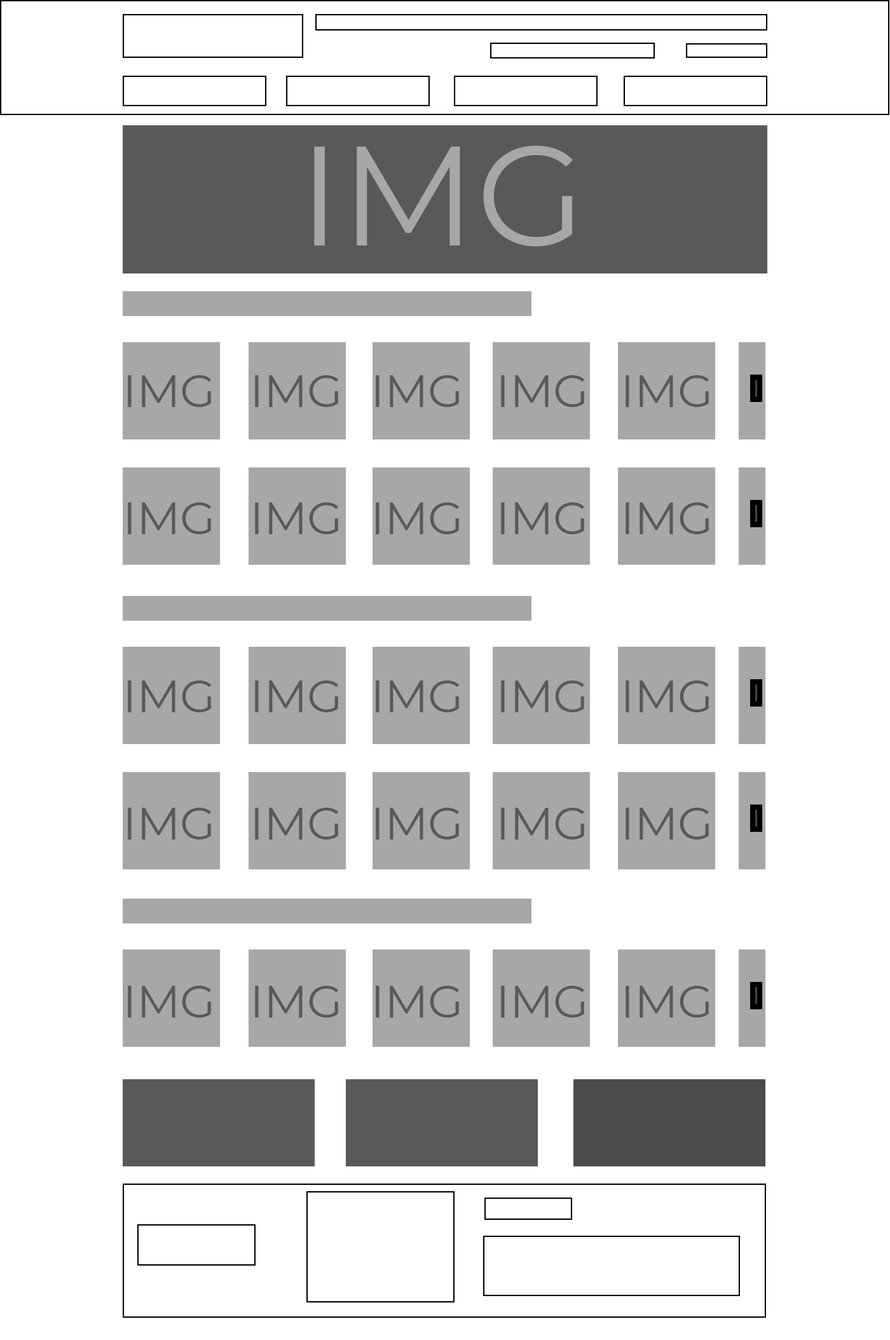
<style>
.page{position:relative;width:890px;height:1340px;background:#ffffff}
.page>*{position:absolute;margin:0}
.t1{font:141.2px "Montserrat-Regular";color:#a7a7a7}
</style>
<div class="page">
<p class="t1" style="left:314px;top:146px;width:259px;height:101px">IMG</p>
</div>
